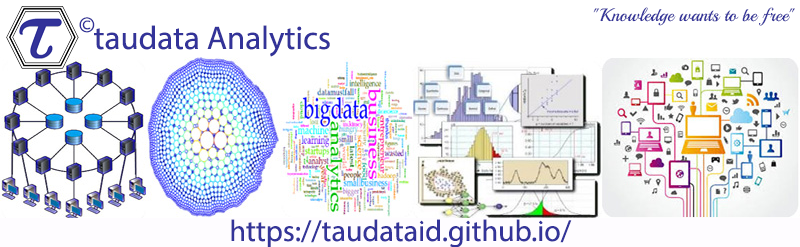
<style>
.page{position:relative;width:800px;height:247px;background:#ffffff}
.page>*{position:absolute;margin:0}
.t1{font:24px "MyriadPro-Regular";color:#333399}
.t2{font:18px "Playball-Regular";color:#333399}
.t3{font:33px "MyriadPro-Regular";color:#333399}
.t4{font:30px "MyriadPro-Regular";color:#333399}
</style>
<div class="page">
<p class="t1" style="left:79px;top:17px;width:16px;height:16px">©</p>
<p class="t2" style="left:593px;top:7px;width:202px;height:19px">"Knowledge wants to be free"</p>
<p class="t3" style="left:94px;top:25px;width:236px;height:32px">taudata Analytics</p>
<p class="t4" style="left:231px;top:219px;width:341px;height:29px">https://taudataid.github.io/</p>
</div>
